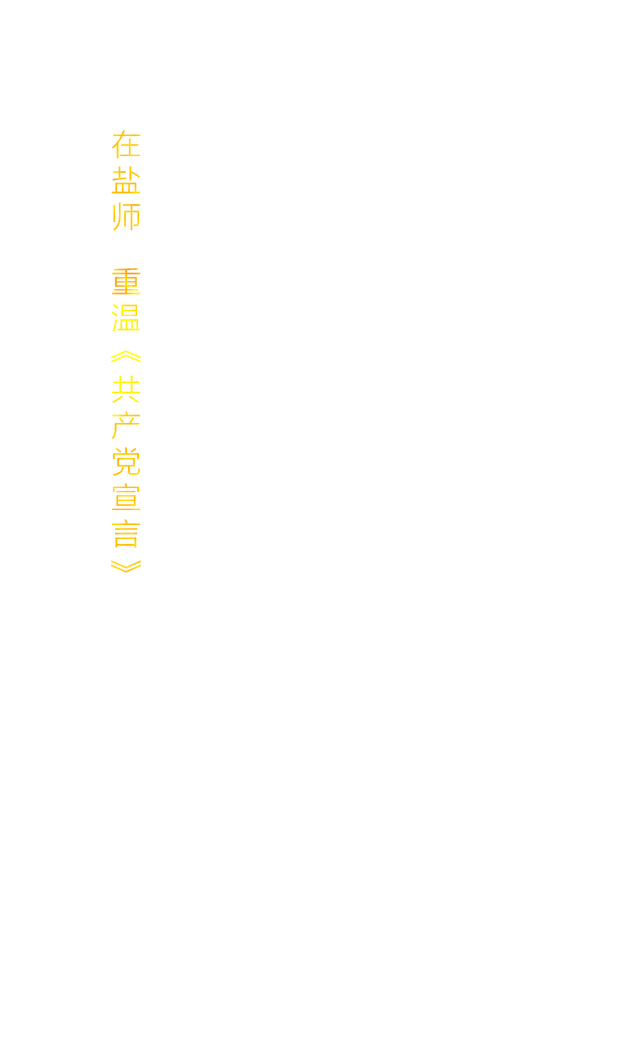
<style>
.page{position:relative;width:640px;height:1040px;background:#ffffff}
.page>*{position:absolute;margin:0}
.t1{font:30px/14.4px "FZLTXHJW--GB1-0";letter-spacing:0.2em;text-transform:uppercase}
</style>
<div class="page">
<p class="t1" style="left:111px;top:130px;width:30px;height:443px">在盐师  重温《共产党宣言》</p>
</div>
